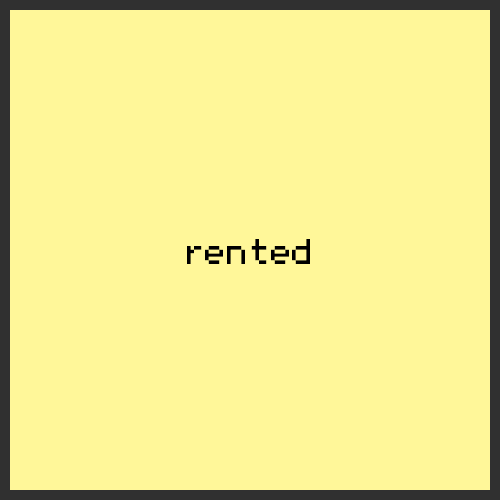
<style>
.page{position:relative;width:500px;height:500px;background:#fff799}
.page>*{position:absolute;margin:0}
.t1{font:32px "DePixel-Breit";color:#000000}
</style>
<div class="page">
<p class="t1" style="left:187px;top:239px;width:123px;height:25px">rented</p>
</div>
